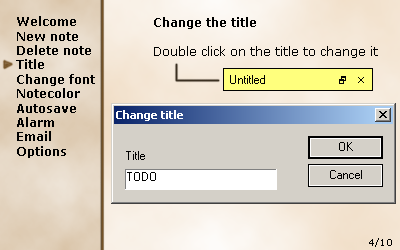
<style>
.page{position:relative;width:400px;height:250px}
.page>*{position:absolute;margin:0}
.t1{font:12px "Verdana-Bold";color:#010101}
.t2{font:12px "Verdana";color:#000000}
.t3{font:12px "Verdana-Bold";color:#000000}
.t4{font:9px "Verdana";color:#000000}
</style>
<div class="page">
<p class="t1" style="left:16px;top:16px;width:79px;height:142px">Welcome<br>New note<br>Delete note<br>Title<br>Change font<br>Notecolor<br>Autosave<br>Alarm<br>Email<br>Options</p>
<p class="t2" style="left:154px;top:17px;width:224px;height:41px"><span class="t3">Change the title<br><br></span>Double click on the title to change it</p>
<p class="t4" style="left:369px;top:238px;width:23px;height:9px">4/10</p>
</div>
